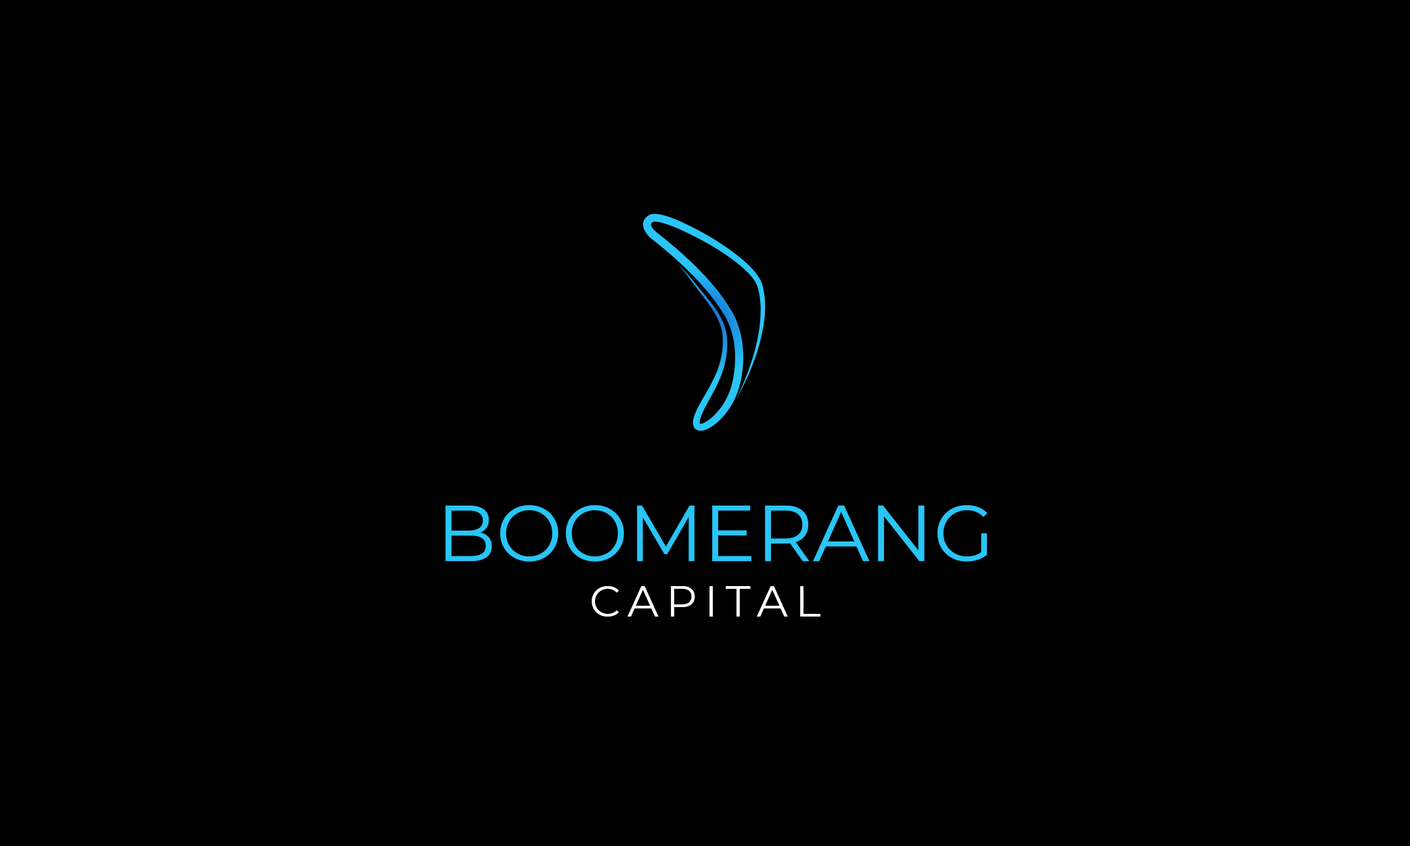
<style>
.page{position:relative;width:1410px;height:846px;background:#000000}
.page>*{position:absolute;margin:0}
.t1{font:78.7px "Montserrat-Regular";color:#29c5f6;text-transform:uppercase}
.t2{font:43.2px "Montserrat-Regular";letter-spacing:0.179em;color:#ffffff;text-transform:uppercase}
.t3{font:43.2px "Montserrat-Regular";color:#ffffff;text-transform:uppercase}
</style>
<div class="page">
<p class="t1" style="left:445px;top:505px;width:542px;height:57px">Boomerang</p>
<p class="t2" style="left:591px;top:586px;width:229px;height:31px">Capita<span class="t3">l</span></p>
</div>
